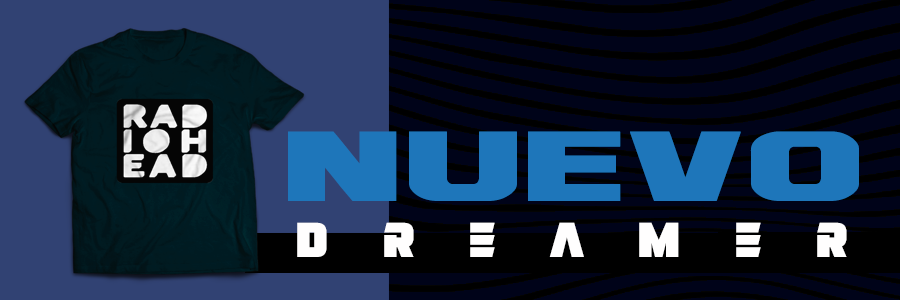
<style>
.page{position:relative;width:900px;height:300px;background:#000319}
.page>*{position:absolute;margin:0}
.t1{font:77.1px "Ash";color:#1e76ba;scale:1.4 1}
.t2{font:50px "NeverBetter";letter-spacing:1.1em;color:#fffefe}
</style>
<div class="page">
<p class="t1" style="left:288px;top:131px;width:571px;height:70px">nuevo</p>
<p class="t2" style="left:297px;top:222px;width:550px;height:35px">dreamer</p>
</div>
